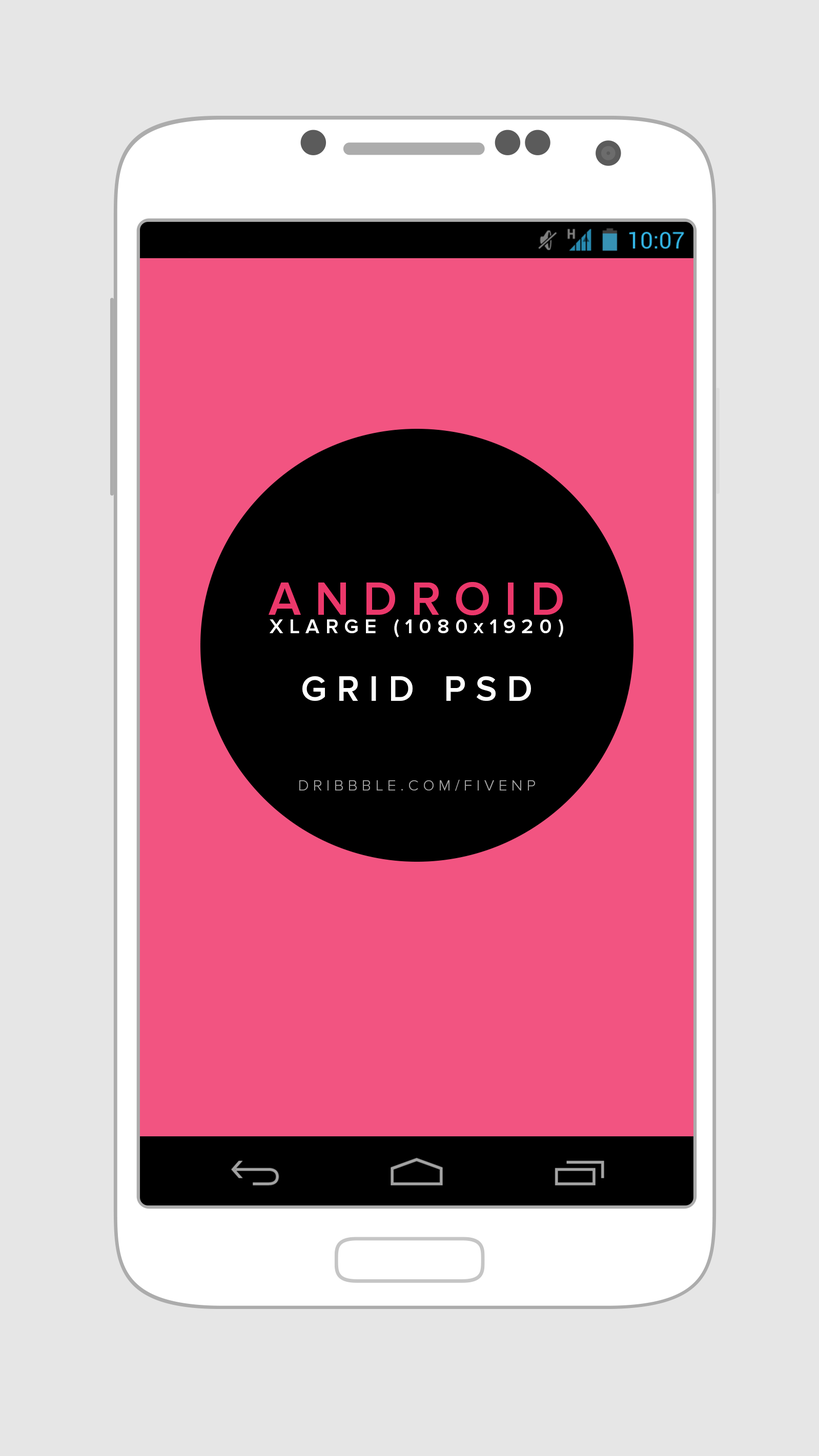
<style>
.page{position:relative;width:819px;height:1456px;background:#e6e6e6}
.page>*{position:absolute;margin:0}
.t1{font:15.4px/46.1px "ProximaNova-Light";letter-spacing:0.28em;color:#a0a0a0;text-transform:uppercase}
.t2{font:48.2px "ProximaNova-Semibold";letter-spacing:0.28em;color:#eb386b}
.t3{font:20.6px/18.4px "ProximaNova-Semibold";letter-spacing:0.28em;color:#ffffff}
.t4{font:20.6px "ProximaNova-Semibold";letter-spacing:0.28em;color:#ffffff}
.t5{font:36px "ProximaNova-Semibold";letter-spacing:0.28em;color:#ffffff}
</style>
<div class="page">
<p class="t1" style="left:269px;top:582px;width:294px;height:209px;text-align:center"><span class="t2">ANDROID<br></span><span class="t3">XLARGE (1080x1920)<br></span><span class="t4"><br></span><span class="t5">GRID PSD<br><br></span>dribbble.com/fivenp</p>
</div>
